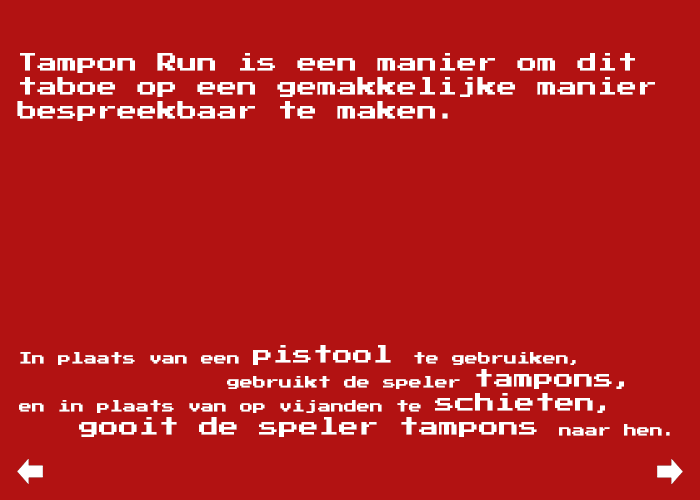
<style>
.page{position:relative;width:700px;height:500px;background:#b21212}
.page>*{position:absolute;margin:0}
.t1{font:20px "PressStart2P";color:#ffffff}
.t2{font:13px "PressStart2P";color:#ffffff}
</style>
<div class="page">
<p class="t1" style="left:17px;top:53px;width:638px;height:68px">Tampon Run is een manier om dit<br>taboe op een gemakkelijke manier<br>bespreekbaar te maken.</p>
<p class="t2" style="left:19px;top:345px;width:651px;height:92px">In plaats van een <span class="t1">pistool </span>te gebruiken, <br>                gebruikt de speler <span class="t1">tampons,<br></span>en in plaats van op vijanden te <span class="t1">schieten,<br>   gooit de speler tampons </span>naar hen.</p>
</div>
